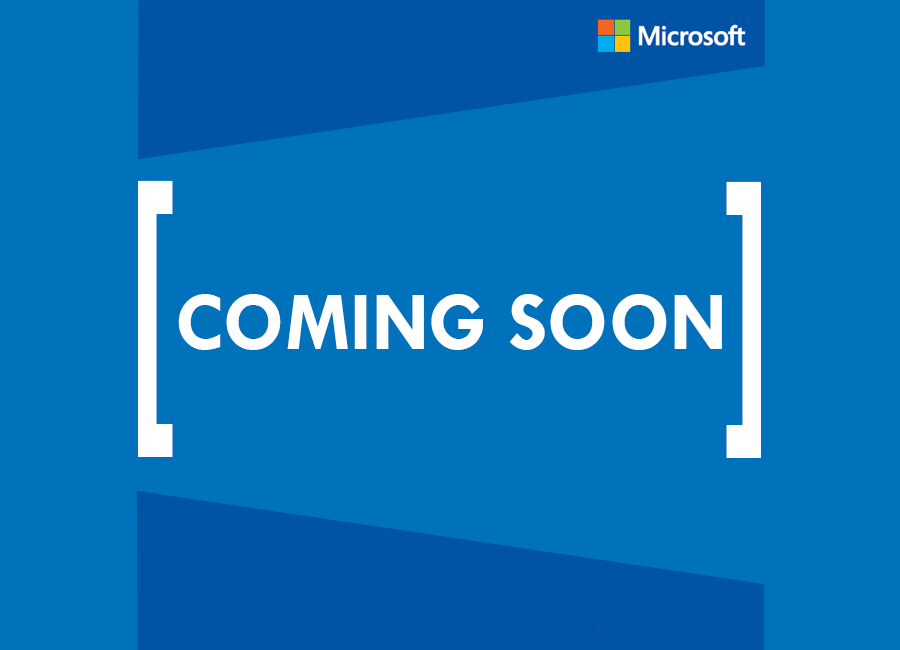
<style>
.page{position:relative;width:900px;height:650px;background:#0072bc}
.page>*{position:absolute;margin:0}
.t1{font:301.6px "Arial-BoldMT";color:#ffffff;scale:0.47 1}
.t2{font:83.5px "TwCenMT-Bold";color:#ffffff}
</style>
<div class="page">
<p class="t1" style="left:138px;top:180px;width:35px;height:277px">[</p>
<p class="t1" style="left:726px;top:181px;width:35px;height:277px;rotate:180deg">[</p>
<p class="t2" style="left:178px;top:294px;width:544px;height:56px">COMING SOON</p>
</div>
